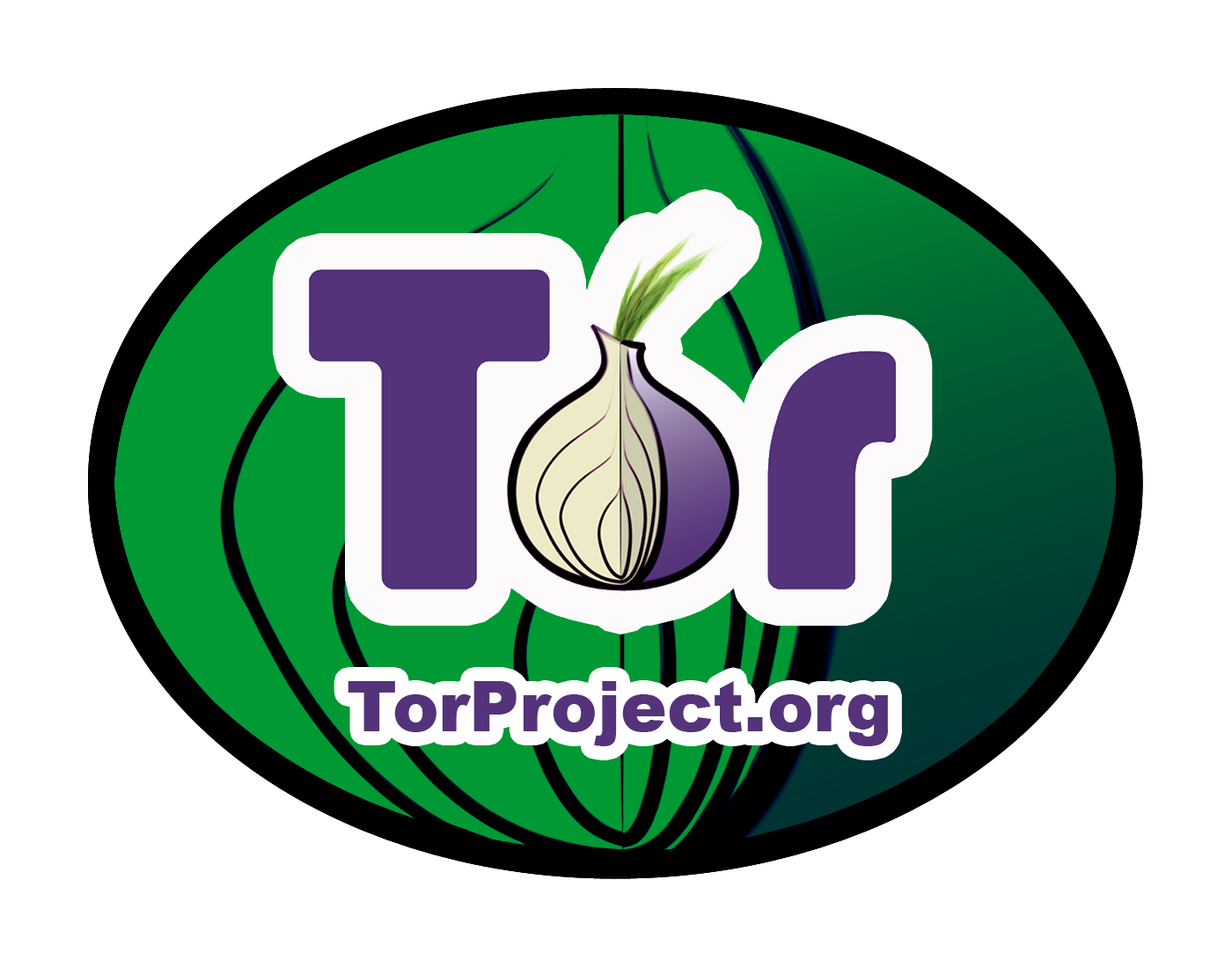
<style>
.page{position:relative;width:1232px;height:968px;background:#ffffff}
.page>*{position:absolute;margin:0}
.t1{font:69.4px "Arial-Black";color:#55337a}
</style>
<div class="page">
<p class="t1" style="left:348px;top:681px;width:540px;height:65px">TorProject.org</p>
</div>
